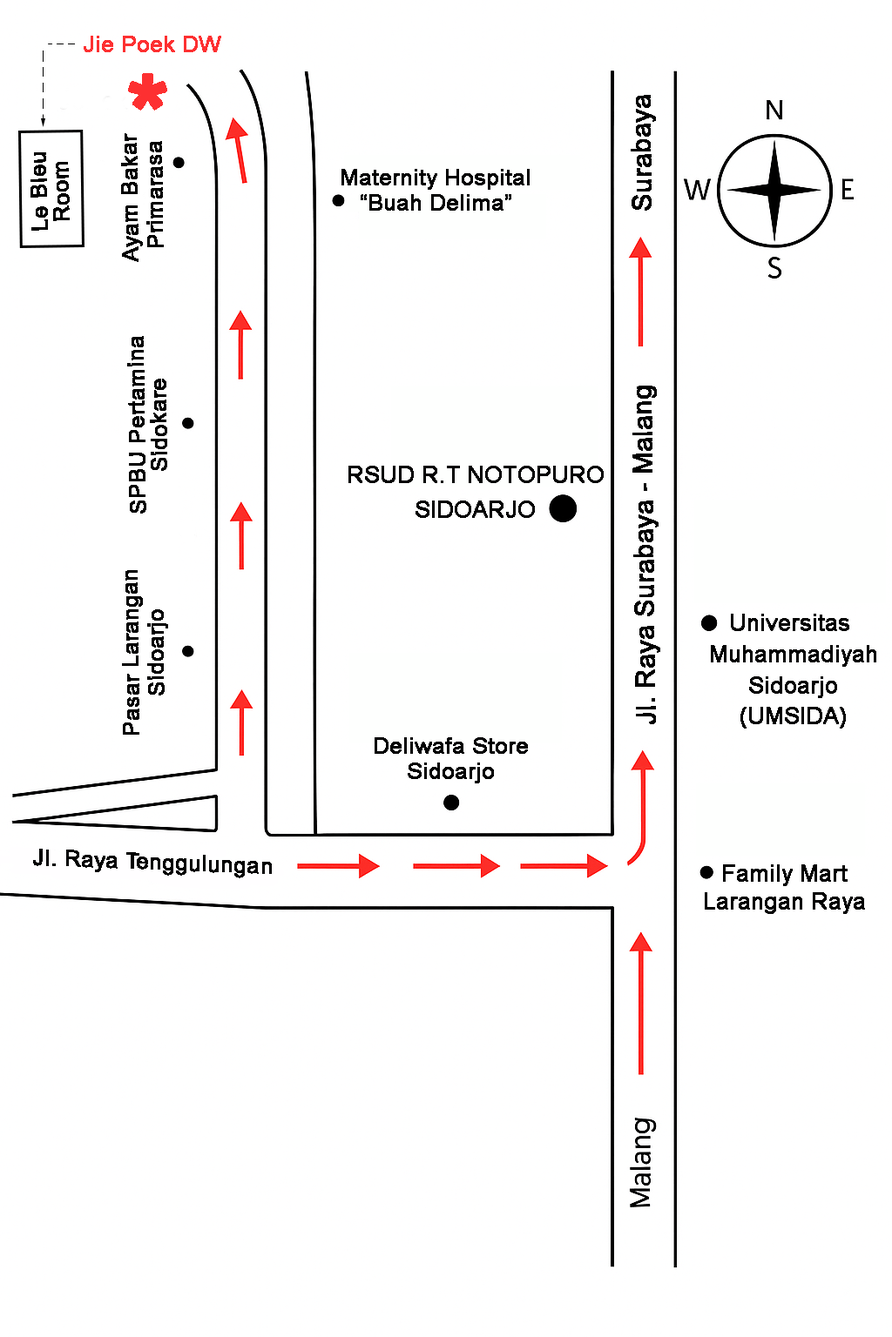
<style>
.page{position:relative;width:892px;height:1337px;background:#ffffff}
.page>*{position:absolute;margin:0}
.t1{font:21.8px "ArialMT";color:#fd3031;font-weight:bold}
.t2{font:108.8px "ArialMT";color:#fd3031;font-weight:bold}
.t3{font:26.1px "ArialMT";color:#000000;font-weight:bold}
.t4{font:21.8px/3.1px "ArialMT";color:#000000;font-weight:bold}
.t5{font:22.6px/3.1px "ArialMT";color:#000000;font-weight:bold}
.t6{font:21.8px "ArialMT";color:#000000;font-weight:bold}
</style>
<div class="page">
<p class="t1" style="left:84px;top:36px;width:137px;height:16px">Jie Poek DW</p>
<p class="t2" style="left:128px;top:73px;width:39px;height:38px">*</p>
<p class="t3" style="left:630px;top:95px;width:26px;height:116px;rotate:-91deg">Surabaya</p>
<p class="t4" style="left:121px;top:133px;width:43px;height:129px;text-align:center;rotate:-91deg">Ayam Bakar <br><br><br><br><br><br><br><br>Primarasa</p>
<p class="t4" style="left:30px;top:152px;width:40px;height:79px;text-align:center;rotate:-92deg">Le Bleu<br><br>  <br><br><br><br><br>Room</p>
<p class="t4" style="left:341px;top:169px;width:188px;height:42px;text-align:center">Maternity Hospital<br><br><br><br><br><br><br><br>“Buah Delima”</p>
<p class="t4" style="left:127px;top:336px;width:40px;height:178px;text-align:center;rotate:-91deg">SPBU Pertamina<br><br><br><br><br><br><br>Sidokare</p>
<p class="t3" style="left:632px;top:386px;width:28px;height:338px;rotate:-91deg">Jl. Raya Surabaya - Malang</p>
<p class="t5" style="left:348px;top:466px;width:255px;height:52px;text-align:center">RSUD R.T NOTOPURO<br><br><br><br><br><br><br><br><br><br><br>SIDOARJO</p>
<p class="t4" style="left:122px;top:570px;width:46px;height:165px;text-align:center;rotate:-91deg">Pasar Larangan<br><br><br><br><br><br><br><br>Sidoarjo</p>
<p class="t5" style="left:710px;top:614px;width:166px;height:115px;text-align:center">Universitas <br><br><br><br><br><br><br><br><br><br>Muhammadiyah<br><br><br><br><br><br><br><br><br><br>Sidoarjo<br><br><br><br><br><br><br><br><br><br>(UMSIDA)</p>
<p class="t4" style="left:374px;top:737px;width:154px;height:47px;text-align:center">Deliwafa Store<br><br><br><br><br><br><br><br>Sidoarjo</p>
<p class="t6" style="left:33px;top:849px;width:239px;height:30px;rotate:2deg">Jl. Raya Tenggulungan</p>
<p class="t5" style="left:704px;top:865px;width:161px;height:49px;text-align:center">Family Mart<br><br><br><br><br><br><br><br><br>Larangan Raya</p>
</div>
